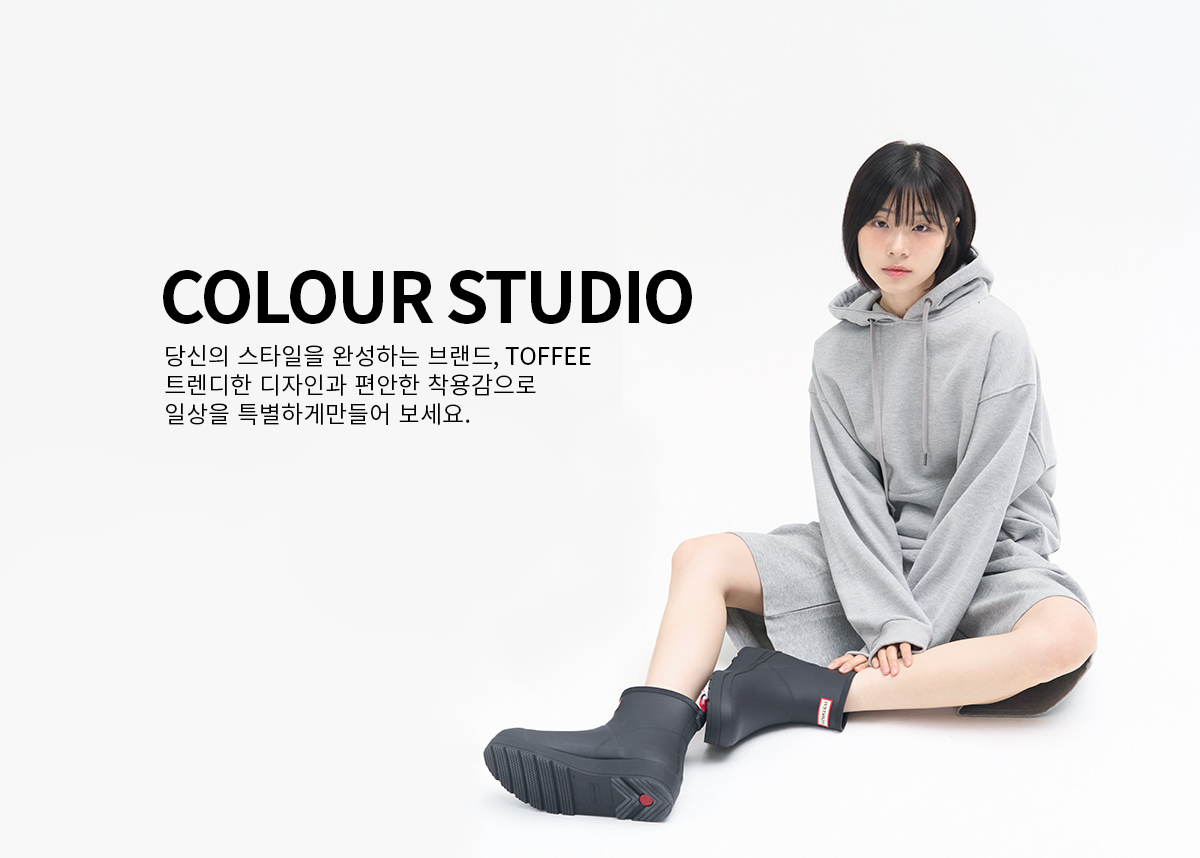
<style>
.page{position:relative;width:1200px;height:858px;background:#f6f6f6}
.page>*{position:absolute;margin:0}
.t1{font:70px "NotoSansKR-Bold";letter-spacing:-0.04em;color:#000000}
.t2{font:24px "NotoSansKR-Regular";color:#000000}
</style>
<div class="page">
<p class="t1" style="left:163px;top:270px;width:529px;height:54px">COLOUR STUDIO</p>
<p class="t2" style="left:165px;top:345px;width:426px;height:80px">당신의 스타일을 완성하는 브랜드, TOFFEE<br>트렌디한 디자인과 편안한 착용감으로 <br>일상을 특별하게만들어 보세요.</p>
</div>
